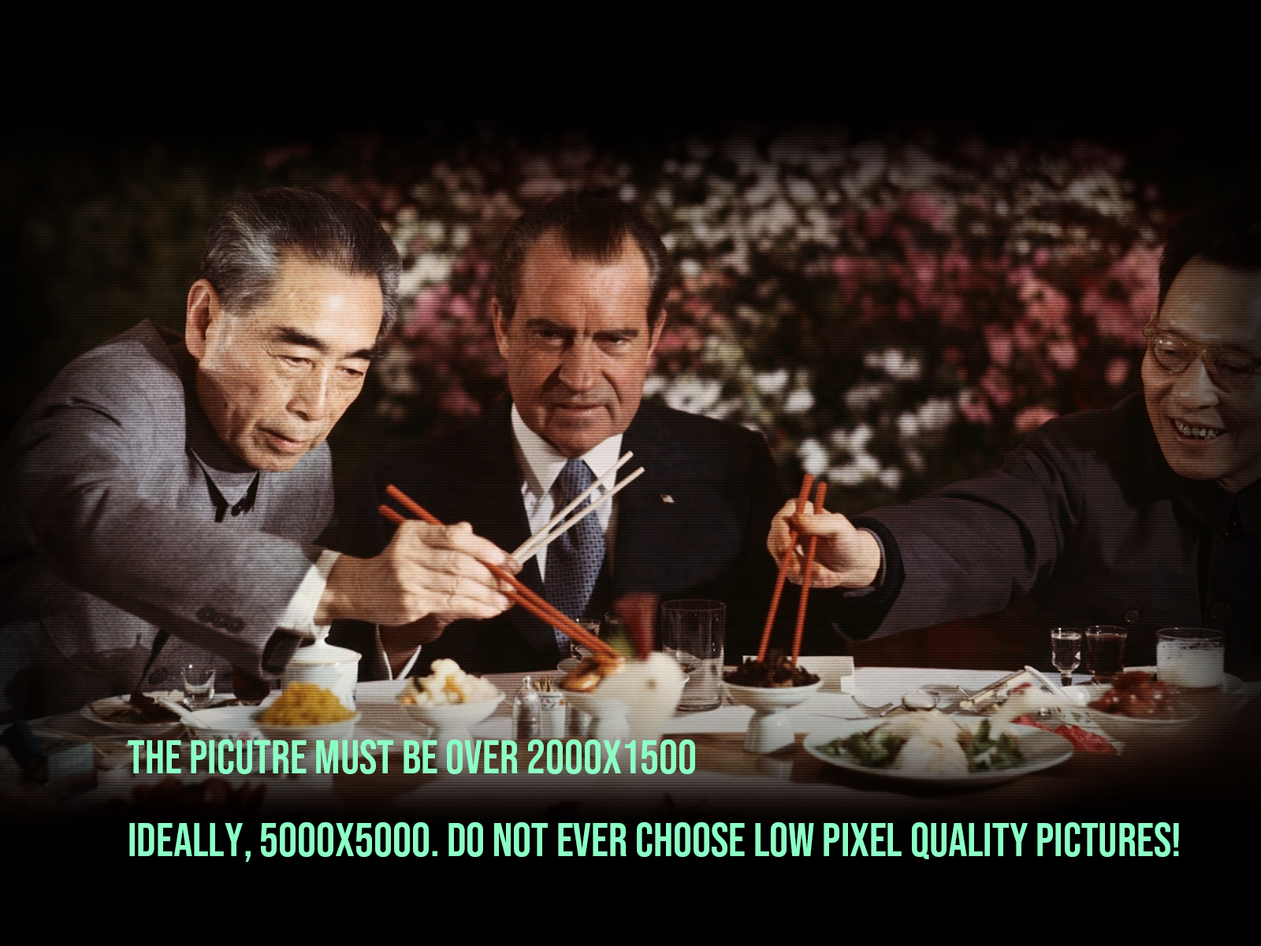
<style>
.page{position:relative;width:1261px;height:946px;background:#000000}
.page>*{position:absolute;margin:0}
.t1{font:47.3px "BebasNeue-Regular";color:#8cffc5}
</style>
<div class="page">
<p class="t1" style="left:128px;top:739px;width:1051px;height:123px">The picutre must be over 2000x1500<br>Ideally, 5000x5000. Do not ever choose low pixel quality pictures!</p>
</div>
